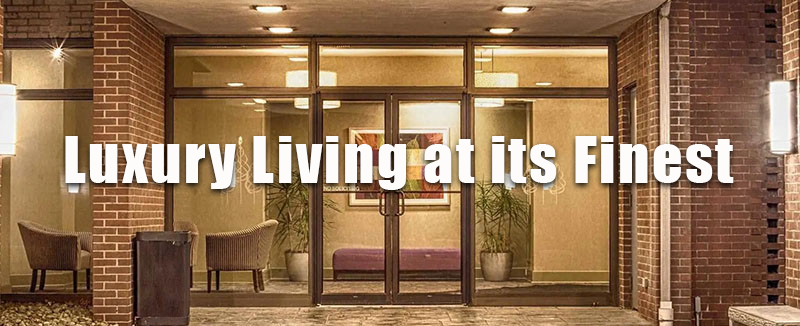
<style>
.page{position:relative;width:800px;height:326px}
.page>*{position:absolute;margin:0}
.t1{font:60px "Impact";letter-spacing:0.04em;color:#fefbfb}
</style>
<div class="page">
<p class="t1" style="left:65px;top:136px;width:669px;height:54px">Luxury Living at its Finest</p>
</div>
